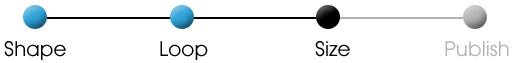
<style>
.page{position:relative;width:515px;height:63px;background:#ffffff}
.page>*{position:absolute;margin:0}
.t1{font:20px "Atlanta-Book";color:#000000}
.t2{font:20px "Atlanta-Book";color:#b2b2b2}
</style>
<div class="page">
<p class="t1" style="left:4px;top:41px;width:62px;height:19px">Shape</p>
<p class="t1" style="left:160px;top:41px;width:48px;height:19px">Loop</p>
<p class="t1" style="left:315px;top:41px;width:35px;height:16px">Size</p>
<p class="t2" style="left:445px;top:41px;width:64px;height:16px">Publish</p>
</div>
